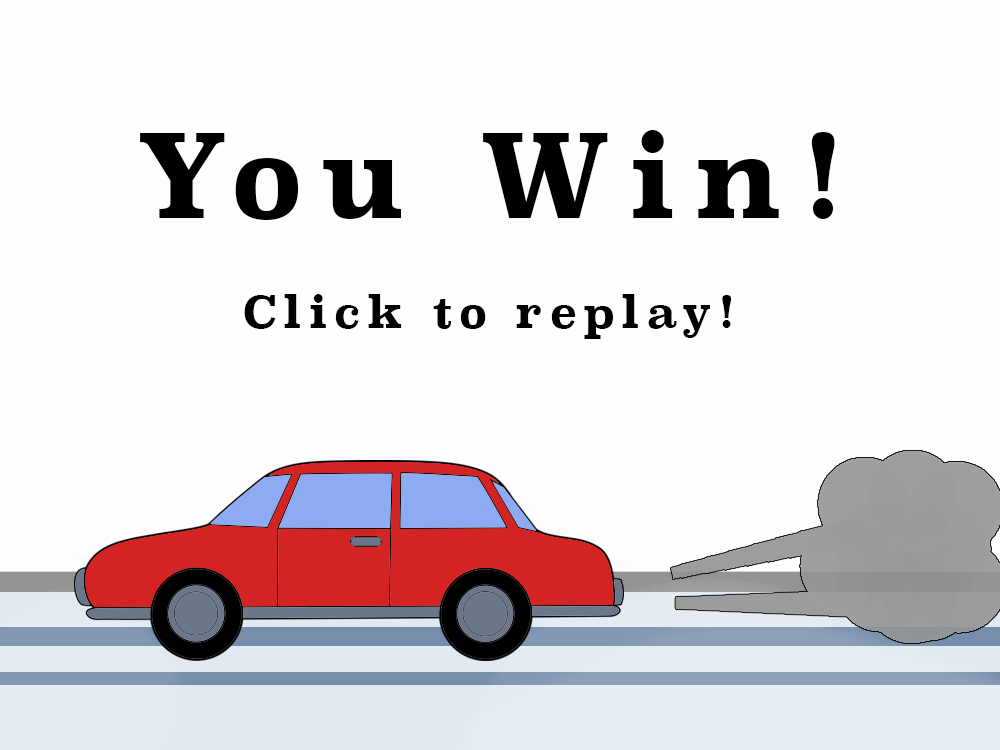
<style>
.page{position:relative;width:1000px;height:750px;background:#fffdfe}
.page>*{position:absolute;margin:0}
.t1{font:113.7px "Superclarendon-Bold";letter-spacing:0.16em;color:#000000;scale:0.97 1}
.t2{font:44.5px "Superclarendon-Bold";letter-spacing:0.16em;color:#000000;scale:0.97 1}
</style>
<div class="page">
<p class="t1" style="left:140px;top:130px;width:695px;height:90px">You Win!</p>
<p class="t2" style="left:244px;top:294px;width:488px;height:45px">Click to replay!</p>
</div>
